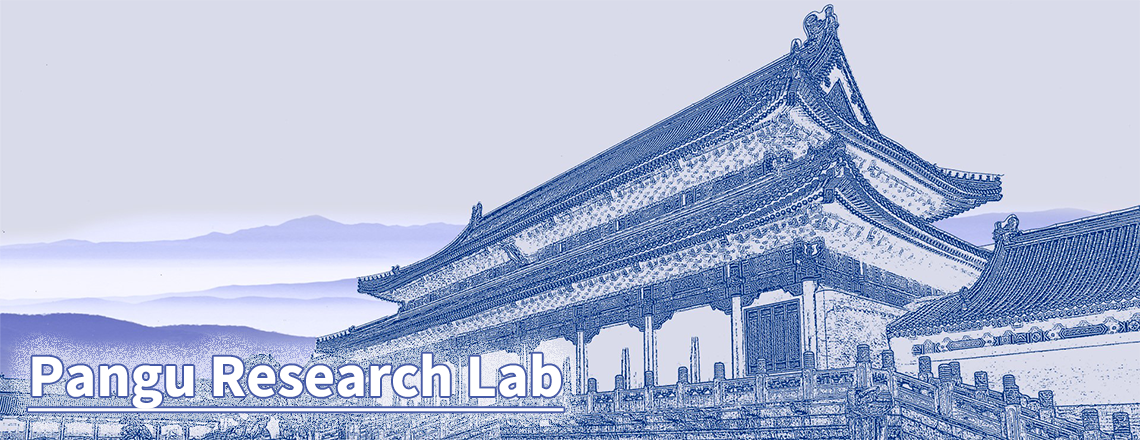
<style>
.page{position:relative;width:1140px;height:440px;background:#d9dbea}
.page>*{position:absolute;margin:0}
.t1{font:60px "SourceSansPro-Bold";color:#ffffff;text-decoration:underline}
</style>
<div class="page">
<p class="t1" style="left:28px;top:353px;width:536px;height:59px">Pangu Research Lab</p>
</div>
